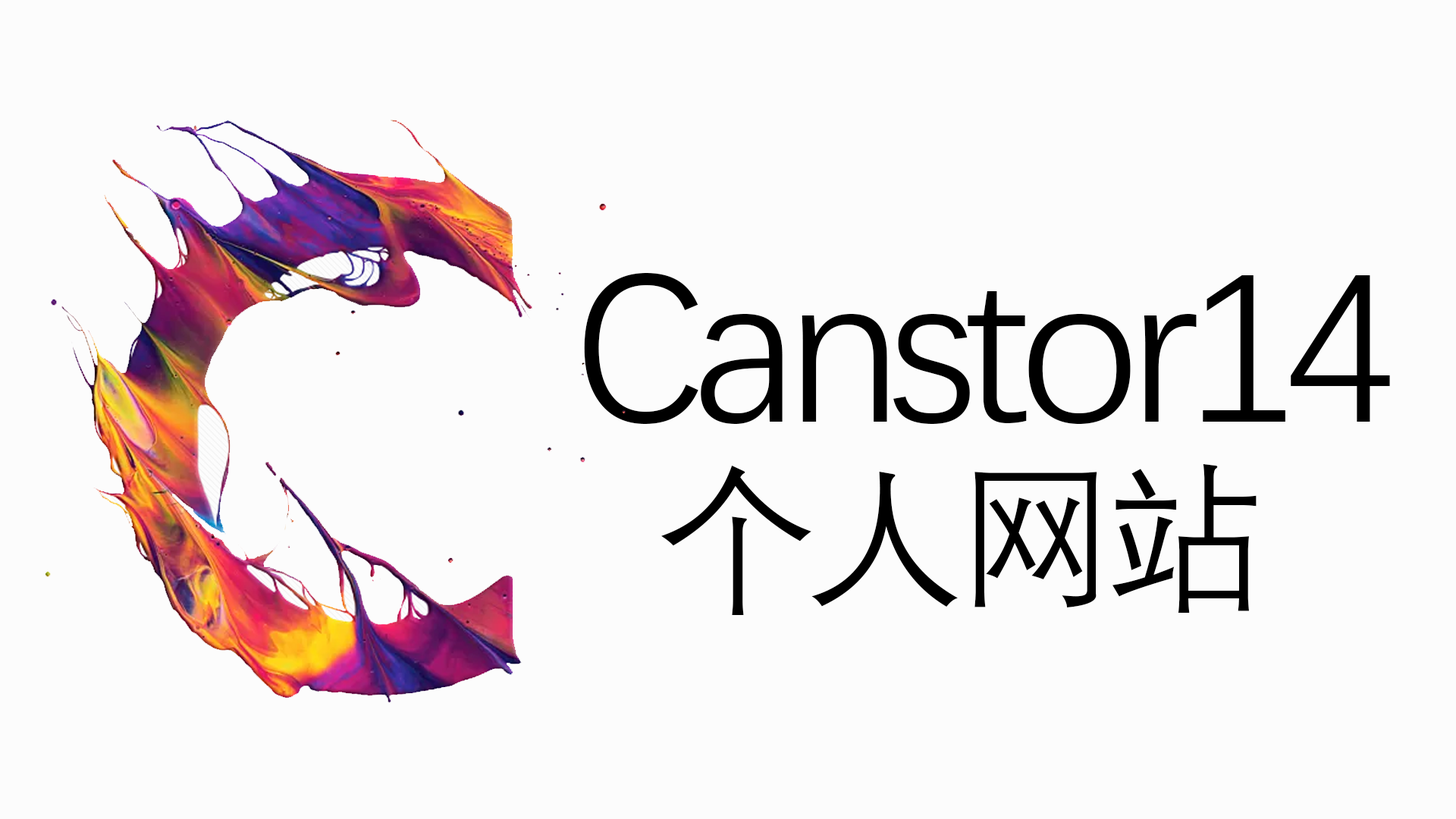
<style>
.page{position:relative;width:1456px;height:819px;background:#fcfcfc}
.page>*{position:absolute;margin:0}
.t1{font:212.9px/176.3px "DengXian";letter-spacing:-0.06em;color:#000000}
.t2{font:159.1px/176.3px "DengXian";letter-spacing:-0.06em;color:#000000}
</style>
<div class="page">
<p class="t1" style="left:584px;top:273px;width:806px;height:342px;text-align:center">Canstor14<br><span class="t2">个人网站</span></p>
</div>
